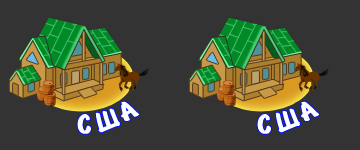
<style>
.page{position:relative;width:360px;height:150px;background:#333333}
.page>*{position:absolute;margin:0}
.t1{font:30px "BrushType-Bold";letter-spacing:0.12em;color:#ffffff}
</style>
<div class="page">
<p class="t1" style="left:77px;top:101px;width:63px;height:33px;rotate:-20deg">ÑØÀ</p>
<p class="t1" style="left:257px;top:101px;width:63px;height:33px;rotate:-20deg">ÑØÀ</p>
</div>
